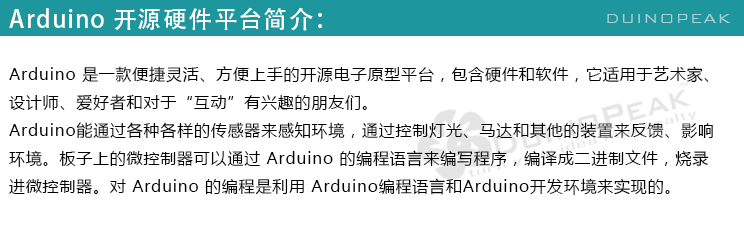
<style>
.page{position:relative;width:744px;height:232px;background:#ffffff}
.page>*{position:absolute;margin:0}
.t1{font:24px "AdobeHeitiStd-Regular";letter-spacing:0.05em;color:#ffffff}
.t2{font:18px "BankGothicBT-Light";letter-spacing:0.05em;color:#a8cfd2}
.t3{font:16px "MicrosoftYaHei";letter-spacing:0.05em;color:#000000}
</style>
<div class="page">
<p class="t1" style="left:9px;top:7px;width:313px;height:24px">Arduino 开源硬件平台简介：</p>
<p class="t2" style="left:607px;top:14px;width:124px;height:9px">DUINOPEAK</p>
<p class="t3" style="left:9px;top:66px;width:704px;height:129px">Arduino 是一款便捷灵活、方便上手的开源电子原型平台，包含硬件和软件，它适用于艺术家、<br>设计师、爱好者和对于“互动”有兴趣的朋友们。 <br>Arduino能通过各种各样的传感器来感知环境，通过控制灯光、马达和其他的装置来反馈、影响<br>环境。板子上的微控制器可以通过 Arduino 的编程语言来编写程序，编译成二进制文件，烧录<br>进微控制器。对 Arduino 的编程是利用 Arduino编程语言和Arduino开发环境来实现的。</p>
</div>
